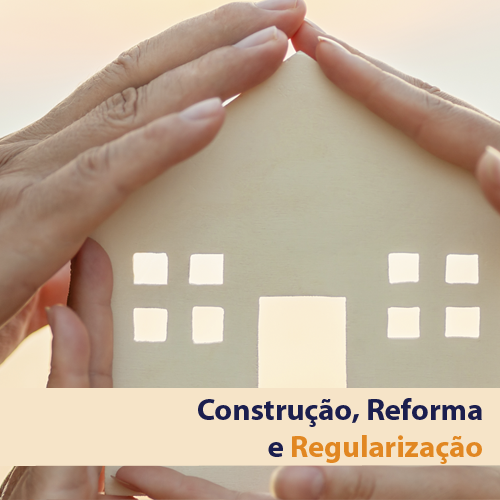
<style>
.page{position:relative;width:500px;height:500px}
.page>*{position:absolute;margin:0}
.t1{font:30.7px "MyriadPro-Bold";color:#1b1e4e}
.t2{font:30.7px "MyriadPro-Bold";color:#e18722}
</style>
<div class="page">
<p class="t1" style="left:198px;top:398px;width:284px;height:66px;text-align:right">Construção, Reforma <br>e <span class="t2">Regularização</span></p>
</div>
